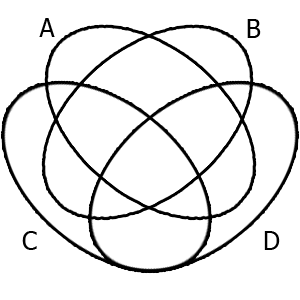
<style>
.page{position:relative;width:300px;height:300px;background:#ffffff}
.page>*{position:absolute;margin:0}
.t1{font:25px "Tahoma";color:#000000}
</style>
<div class="page">
<p class="t1" style="left:39px;top:18px;width:16px;height:19px">A</p>
<p class="t1" style="left:247px;top:19px;width:14px;height:19px">B</p>
<p class="t1" style="left:22px;top:231px;width:15px;height:19px">C</p>
<p class="t1" style="left:264px;top:231px;width:16px;height:19px">D</p>
</div>
